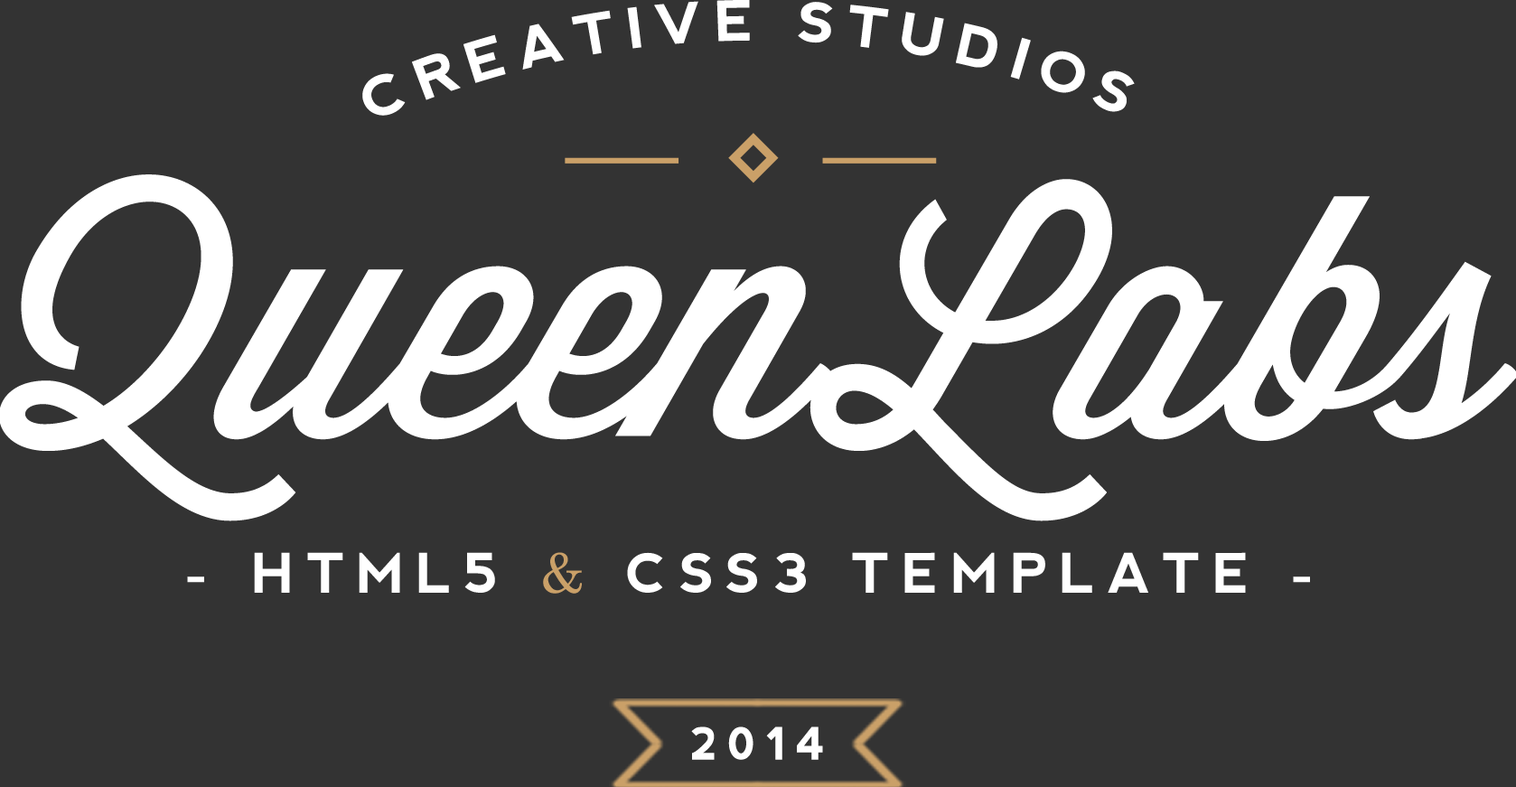
<style>
.page{position:relative;width:1516px;height:787px;background:#333333}
.page>*{position:absolute;margin:0}
.t1{font:55.2px "nevis-Bold";letter-spacing:0.2em;color:#ffffff;text-transform:uppercase}
.t2{font:54.3px "nevis-Bold";letter-spacing:0.2em;color:#ffffff;text-transform:uppercase}
.t3{font:54.3px "Century";letter-spacing:0.2em;color:#caa068;text-transform:uppercase}
.t4{font:44.3px "nevis-Bold";letter-spacing:0.2em;color:#ffffff;text-transform:uppercase}
</style>
<div class="page">
<p class="t1" style="left:362px;top:0px;width:772px;height:116px;text-align:center">Creative studios</p>
<p class="t2" style="left:187px;top:552px;width:1123px;height:41px">- HTML5 <span class="t3">&amp; </span>CSS3 TEMPLATE -</p>
<p class="t4" style="left:691px;top:726px;width:132px;height:34px">2014</p>
</div>
